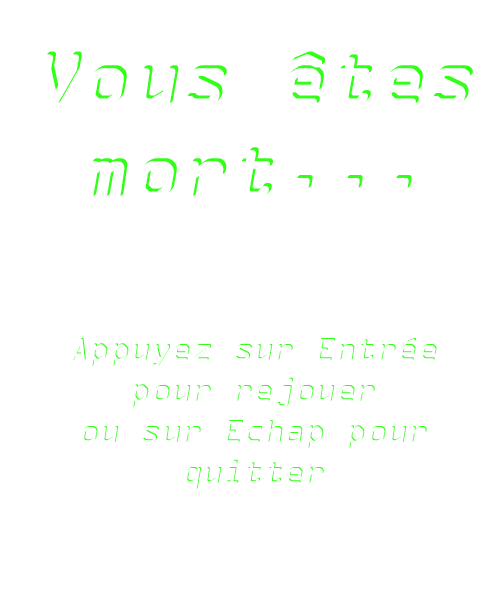
<style>
.page{position:relative;width:500px;height:600px;background:#ffffff}
.page>*{position:absolute;margin:0}
.t1{font:77.8px "OCRAExtended";font-weight:bold;font-style:italic}
.t2{font:34px "OCRAExtended";font-style:italic}
</style>
<div class="page">
<p class="t1" style="left:45px;top:51px;width:428px;height:145px;text-align:center">Vous êtes mort...</p>
<p class="t2" style="left:71px;top:338px;width:366px;height:151px;text-align:center">Appuyez sur Entrée pour rejouer<br>ou sur Echap pour quitter</p>
</div>
